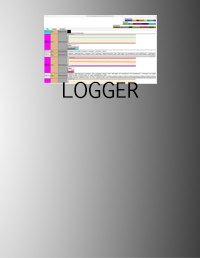
<style>
.page{position:relative;width:200px;height:258px}
.page>*{position:absolute;margin:0}
.t1{font:20px "Geneva";color:#000000}
</style>
<div class="page">
<p class="t1" style="left:63px;top:81px;width:76px;height:18px">LOGGER</p>
</div>
